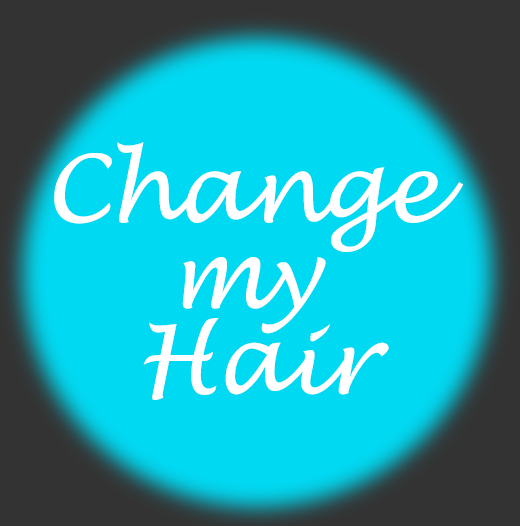
<style>
.page{position:relative;width:520px;height:526px;background:#00d9f2}
.page>*{position:absolute;margin:0}
.t1{font:92.7px/85.7px "LucidaHandwriting-Italic";letter-spacing:-0.02em;color:#ffffff}
</style>
<div class="page">
<p class="t1" style="left:54px;top:142px;width:410px;height:258px;text-align:center">Change <br>my <br>Hair</p>
</div>
